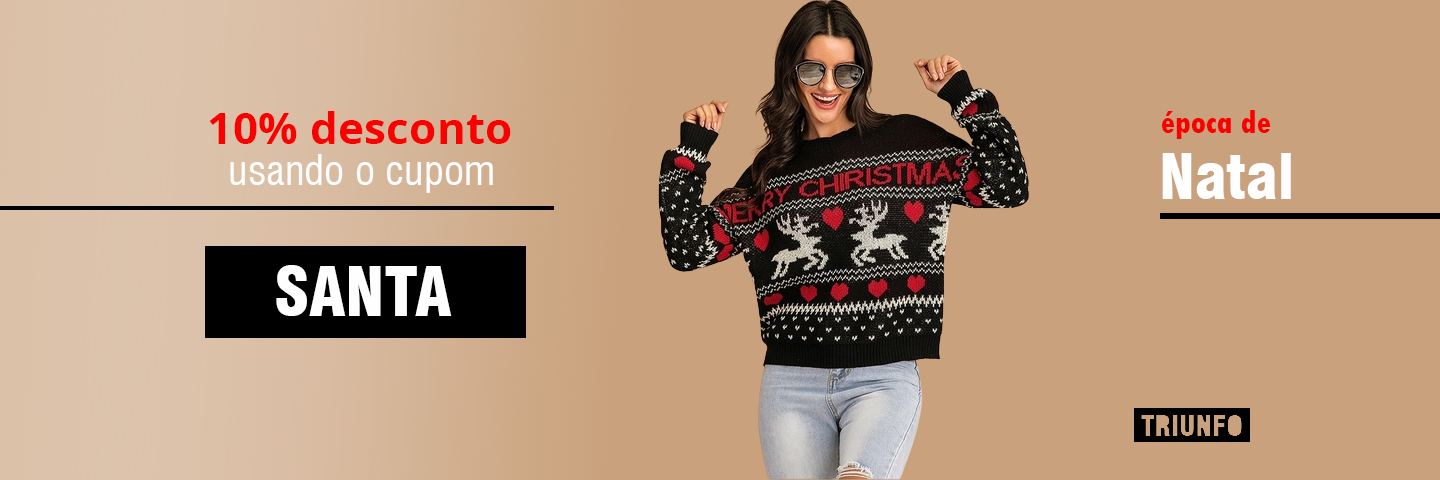
<style>
.page{position:relative;width:1440px;height:480px;background:#c9a17c}
.page>*{position:absolute;margin:0}
.t1{font:44.4px "OpenSans-Bold";color:#fa0000}
.t2{font:33.3px "TwCenMT-CondensedExtraBold";color:#fa0000}
.t3{font:41.4px "Swiss721BT-RomanCondensed";color:#fefefe}
.t4{font:61.2px "Swiss721BT-BlackCondensed";color:#ffffff}
.t5{font:66.7px "Swiss721BT-BlackCondensed";color:#fefefe}
</style>
<div class="page">
<p class="t1" style="left:209px;top:111px;width:302px;height:33px">10% desconto</p>
<p class="t2" style="left:1162px;top:110px;width:109px;height:29px">época de</p>
<p class="t3" style="left:230px;top:154px;width:263px;height:39px">usando o cupom</p>
<p class="t4" style="left:1162px;top:153px;width:129px;height:46px">Natal</p>
<p class="t5" style="left:276px;top:265px;width:176px;height:51px">SANTA</p>
</div>
